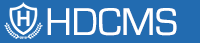
<style>
.page{position:relative;width:200px;height:43px;background:#226bb0}
.page>*{position:absolute;margin:0}
.t1{font:39.8px "EurostileRegular";color:#ffffff}
</style>
<div class="page">
<p class="t1" style="left:47px;top:8px;width:130px;height:28px">HDCMS</p>
</div>
